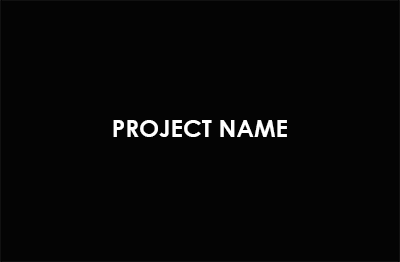
<style>
.page{position:relative;width:400px;height:262px;background:#040404}
.page>*{position:absolute;margin:0}
.t1{font:23.9px "CenturyGothic-Bold";color:#ffffff}
</style>
<div class="page">
<p class="t1" style="left:113px;top:120px;width:174px;height:17px">PROJECT NAME</p>
</div>
